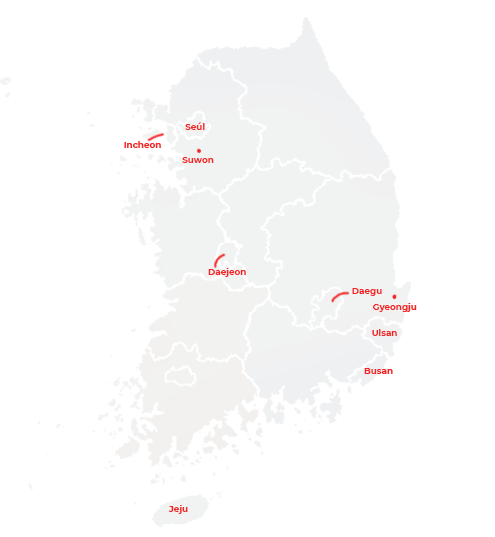
<style>
.page{position:relative;width:495px;height:537px;background:#ffffff}
.page>*{position:absolute;margin:0}
.t1{font:8.8px "Montserrat-Bold";color:#f32424}
</style>
<div class="page">
<p class="t1" style="left:185px;top:122px;width:20px;height:8px">Seúl</p>
<p class="t1" style="left:124px;top:141px;width:37px;height:7px">Incheon</p>
<p class="t1" style="left:182px;top:157px;width:32px;height:6px">Suwon</p>
<p class="t1" style="left:208px;top:268px;width:38px;height:9px">Daejeon</p>
<p class="t1" style="left:352px;top:288px;width:30px;height:8px">Daegu</p>
<p class="t1" style="left:373px;top:303px;width:44px;height:9px">Gyeongju</p>
<p class="t1" style="left:372px;top:329px;width:25px;height:7px">Ulsan</p>
<p class="t1" style="left:364px;top:368px;width:29px;height:6px">Busan</p>
<p class="t1" style="left:168px;top:505px;width:20px;height:9px">Jeju</p>
</div>
